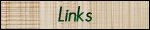
<style>
.page{position:relative;width:150px;height:30px}
.page>*{position:absolute;margin:0}
.t1{font:20px "GeosansLight-Oblique";color:#003114;font-weight:bold}
</style>
<div class="page">
<p class="t1" style="left:58px;top:6px;width:34px;height:16px">Links</p>
</div>
